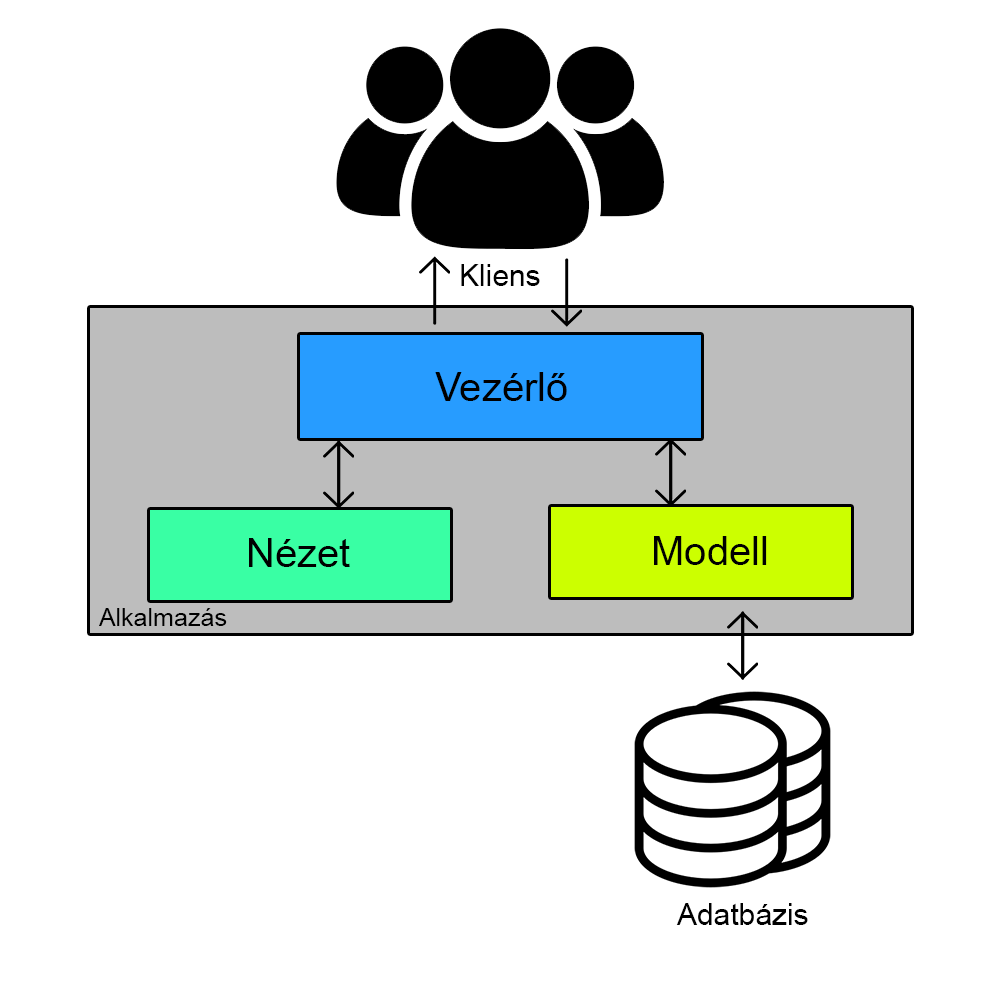
<style>
.page{position:relative;width:1000px;height:1000px;background:#ffffff}
.page>*{position:absolute;margin:0}
.t1{font:30px "ArialMT";color:#000000}
.t2{font:40px "ArialMT";color:#000000}
.t3{font:25px "ArialMT";color:#000000}
</style>
<div class="page">
<p class="t1" style="left:461px;top:264px;width:79px;height:22px">Kliens</p>
<p class="t2" style="left:435px;top:372px;width:132px;height:29px">Vezérlő</p>
<p class="t2" style="left:249px;top:538px;width:101px;height:29px">Nézet</p>
<p class="t2" style="left:654px;top:536px;width:113px;height:29px">Modell</p>
<p class="t3" style="left:99px;top:608px;width:128px;height:18px">Alkalmazás</p>
<p class="t1" style="left:676px;top:903px;width:132px;height:22px">Adatbázis</p>
</div>
